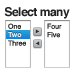
<style>
.page{position:relative;width:75px;height:75px;background:#ffffff}
.page>*{position:absolute;margin:0}
.t1{font:12px "Helvetica-Bold";letter-spacing:-0.04em;color:#222222}
.t2{font:7px "Helvetica";color:#222222}
.t3{font:7px "Helvetica-Bold";color:#ffffff}
</style>
<div class="page">
<p class="t1" style="left:4px;top:7px;width:66px;height:12px">Select many</p>
<p class="t2" style="left:8px;top:23px;width:18px;height:23px">One<br>Two<br>Three</p>
<p class="t2" style="left:47px;top:23px;width:15px;height:15px">Four<br>Five</p>
<p class="t3" style="left:8px;top:32px;width:14px;height:5px">Two</p>
</div>
